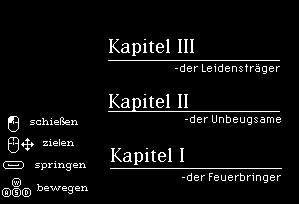
<style>
.page{position:relative;width:299px;height:204px;background:#000000}
.page>*{position:absolute;margin:0}
.t1{font:21px "LoRes21OT-SerifRegular";color:#ffffff}
.t2{font:12px "LoRes12OT-Regular";color:#ffffff}
.t3{font:10px "ConnectionSerif";color:#ffffff}
.t4{font:10px "MyriadPro-Regular";color:#ffffff}
</style>
<div class="page">
<p class="t1" style="left:109px;top:39px;width:86px;height:17px">Kapitel III</p>
<p class="t2" style="left:175px;top:64px;width:105px;height:10px">-der Leidensträger</p>
<p class="t1" style="left:109px;top:94px;width:80px;height:17px">Kapitel II</p>
<p class="t3" style="left:29px;top:117px;width:50px;height:8px">schie<span class="t4">ß</span>en</p>
<p class="t2" style="left:185px;top:115px;width:96px;height:10px">-der Unbeugsame</p>
<p class="t3" style="left:42px;top:139px;width:33px;height:7px">zielen</p>
<p class="t1" style="left:111px;top:148px;width:74px;height:17px">Kapitel I</p>
<p class="t3" style="left:34px;top:161px;width:53px;height:10px">springen</p>
<p class="t2" style="left:182px;top:173px;width:99px;height:10px">-der Feuerbringer</p>
<p class="t3" style="left:36px;top:184px;width:53px;height:10px">bewegen</p>
</div>
